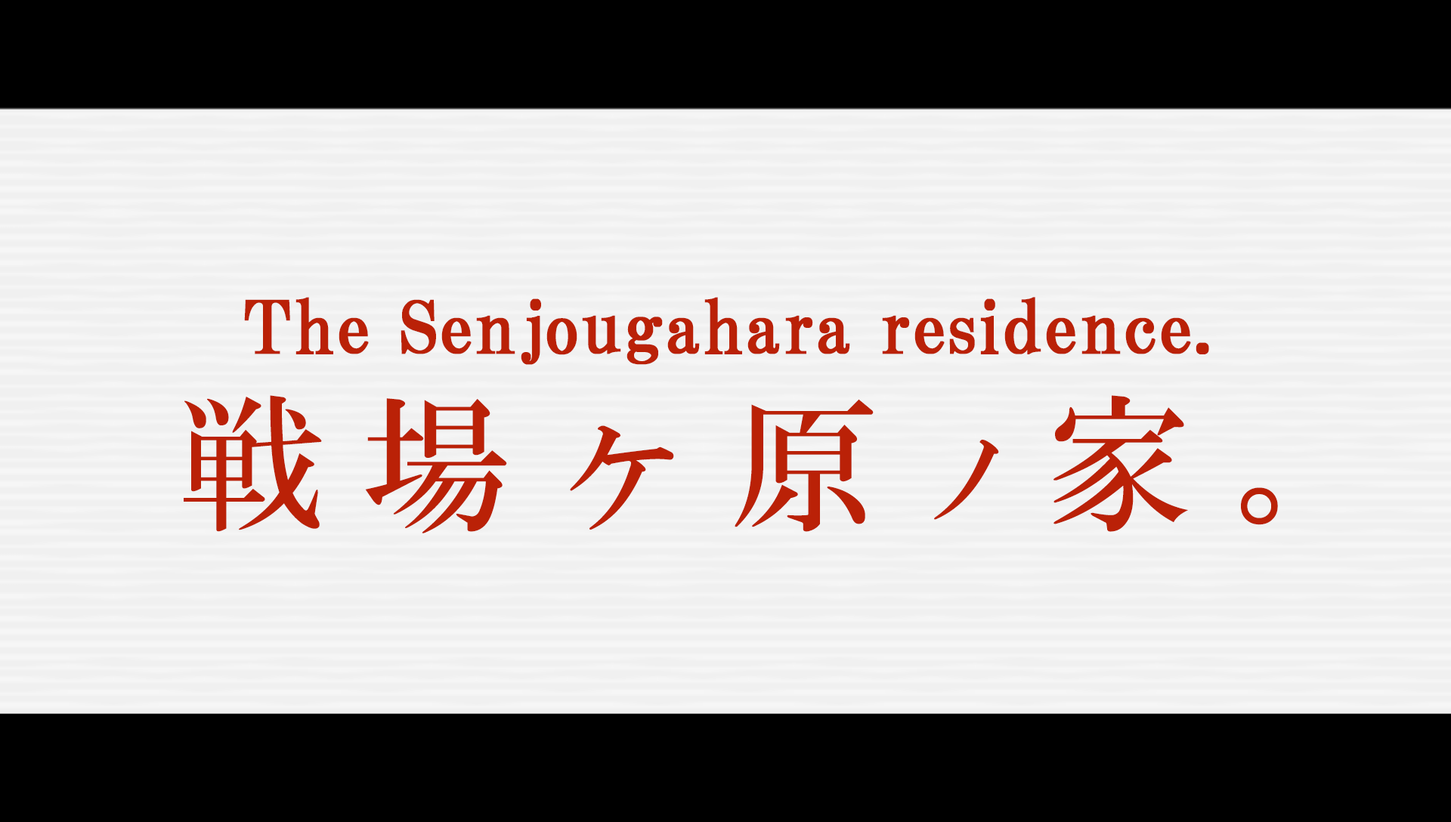
<style>
.page{position:relative;width:1451px;height:822px;background:#f0f0f0}
.page>*{position:absolute;margin:0}
.t1{font:72.5px "HGPMinchoB";letter-spacing:0.01em;color:#ba2107;font-weight:bold}
.t2{font:146.6px "HGMinchoB";letter-spacing:0.26em;color:#ba2107}
.t3{font:102.8px "HGMinchoB";letter-spacing:0.26em;color:#ba2107}
</style>
<div class="page">
<p class="t1" style="left:244px;top:297px;width:965px;height:68px">The Senjougahara residence.</p>
<p class="t2" style="left:184px;top:395px;width:1094px;height:138px">戦場ヶ原<span class="t3">ノ</span>家。</p>
</div>
